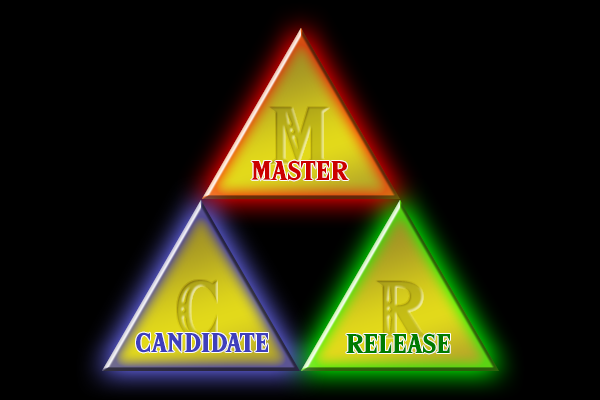
<style>
.page{position:relative;width:600px;height:400px;background:#000000}
.page>*{position:absolute;margin:0}
.t1{font:71.1px "HyliaSerifBeta-Regular";letter-spacing:-0.002em}
.t2{font:31px "HyliaSerifBeta-Regular";letter-spacing:-0.002em;color:#cb0000}
.t3{font:31px "HyliaSerifBeta-Regular";letter-spacing:-0.002em;color:#3f3fbc}
.t4{font:31px "HyliaSerifBeta-Regular";letter-spacing:-0.002em;color:#007b00}
</style>
<div class="page">
<p class="t1" style="left:269px;top:107px;width:60px;height:59px">M</p>
<p class="t2" style="left:251px;top:160px;width:98px;height:21px">master</p>
<p class="t1" style="left:177px;top:280px;width:40px;height:60px">C</p>
<p class="t1" style="left:376px;top:281px;width:52px;height:57px">R</p>
<p class="t3" style="left:136px;top:332px;width:132px;height:21px">candidate</p>
<p class="t4" style="left:346px;top:333px;width:104px;height:21px">release</p>
</div>
